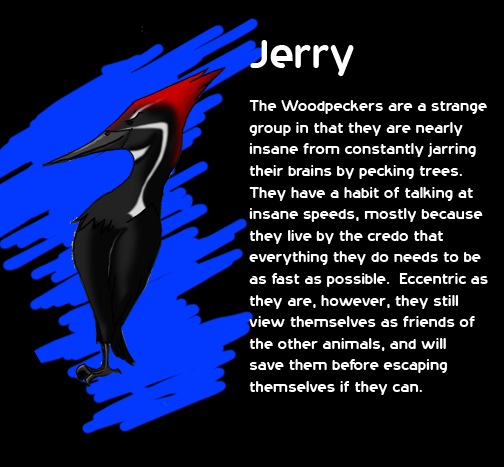
<style>
.page{position:relative;width:504px;height:467px;background:#000000}
.page>*{position:absolute;margin:0}
.t1{font:18px "20thCenturyFont";color:#ffffff}
.t2{font:48px "20thCenturyFont";color:#ffffff}
</style>
<div class="page">
<p class="t1" style="left:249px;top:40px;width:239px;height:355px"><span class="t2">Jerry<br></span><br>The Woodpeckers are a strange <br>group in that they are nearly <br>insane from constantly jarring <br>their brains by pecking trees.  <br>They have a habit of talking at <br>insane speeds, mostly because <br>they live by the credo that <br>everything they do needs to be <br>as fast as possible.  Eccentric as <br>they are, however, they still <br>view themselves as friends of <br>the other animals, and will <br>save them before escaping <br>themselves if they can.</p>
</div>
